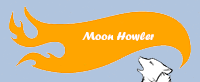
<style>
.page{position:relative;width:200px;height:82px;background:#b0c4de}
.page>*{position:absolute;margin:0}
.t1{font:11.7px "ForteMT";color:#ffffff}
</style>
<div class="page">
<p class="t1" style="left:82px;top:32px;width:72px;height:9px">Moon Howler</p>
</div>
